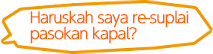
<style>
.page{position:relative;width:213px;height:54px;background:#ffffff}
.page>*{position:absolute;margin:0}
.t1{font:15px/16px "UDShinGoPro-Light";letter-spacing:-0.08em;color:#ff6200;font-weight:bold}
</style>
<div class="page">
<p class="t1" style="left:30px;top:10px;width:159px;height:34px">Haruskah saya re-suplai <br>pasokan kapal?</p>
</div>
